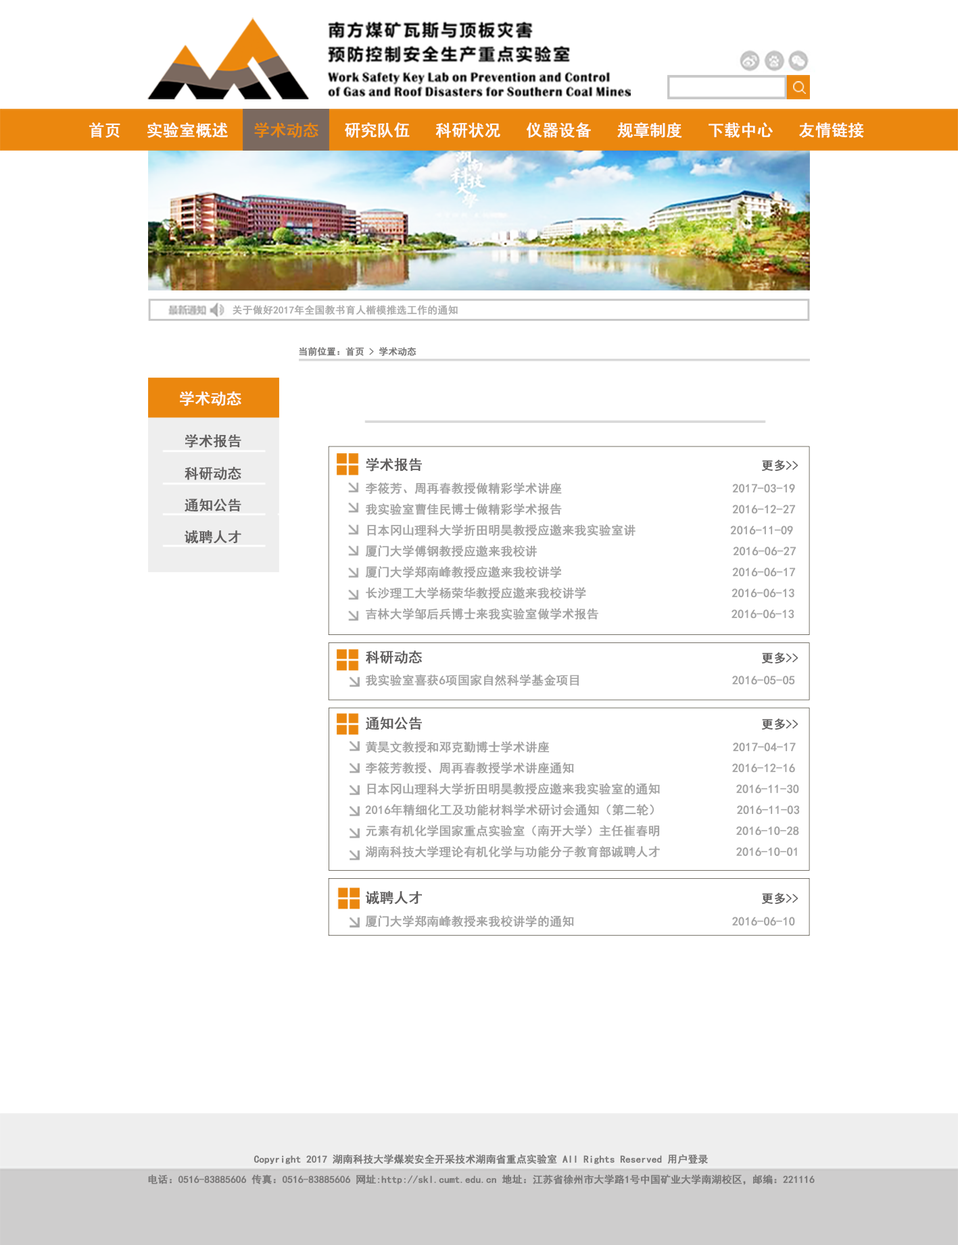
<style>
.page{position:relative;width:958px;height:1245px;background:#ffffff}
.page>*{position:absolute;margin:0}
.t1{font:16px "SimHei";color:#fffcfc;font-weight:bold}
.t2{font:16px "SimHei";color:#eb870e;font-weight:bold}
.t3{font:10px "SimHei";color:#acacac;font-weight:bold}
.t4{font:9.2px "SimHei";color:#787777;font-weight:bold}
.t5{font:15.3px "SimHei";color:#fefbfb;font-weight:bold}
.t6{font:14px/31.9px "SimHei";color:#605e5e;font-weight:bold}
.t7{font:12px "SimHei";color:#a3a3a3;font-weight:bold}
.t8{font:14px "SimHei";color:#605e5e;font-weight:bold}
.t9{font:12px "SimHei";color:#605e5e;font-weight:bold}
.t10{font:9.9px/9.9px "SimHei";color:#787777;font-weight:bold}
</style>
<div class="page">
<p class="t1" style="left:89px;top:122px;width:775px;height:16px">首页   实验室概述 <span class="t2">  学术动态 </span>  研究队伍   科研状况   仪器设备   规章制度   下载中心   友情链接</p>
<p class="t3" style="left:232px;top:305px;width:225px;height:10px">关于做好2017年全国教书育人楷模推选工作的通知</p>
<p class="t4" style="left:299px;top:347px;width:117px;height:9px">当前位置：首页 &gt; 学术动态</p>
<p class="t5" style="left:180px;top:391px;width:61px;height:15px">学术动态</p>
<p class="t6" style="left:184px;top:434px;width:57px;height:110px">学术报告 <br>科研动态 <br>通知公告 <br>诚聘人才</p>
<p class="t7" style="left:365px;top:457px;width:434px;height:471px"><span class="t8">学术报告                                              </span><span class="t9">更多&gt;&gt; <br></span>李筱芳、周再春教授做精彩学术讲座                           2017-03-19<br>我实验室曹佳民博士做精彩学术报告                           2016-12-27 <br>日本冈山理科大学折田明昊教授应邀来我实验室讲               2016-11-09 <br>厦门大学傅钢教授应邀来我校讲                               2016-06-27 <br>厦门大学郑南峰教授应邀来我校讲学                           2016-06-17 <br>长沙理工大学杨荣华教授应邀来我校讲学                       2016-06-13 <br>吉林大学邹后兵博士来我实验室做学术报告                     2016-06-13 <br><br><span class="t8">科研动态                                              </span><span class="t9">更多&gt;&gt; <br></span>我实验室喜获6项国家自然科学基金项目                        2016-05-05 <br><br><span class="t8">通知公告                                              </span><span class="t9">更多&gt;&gt; <br></span>黄昊文教授和邓克勤博士学术讲座                             2017-04-17 <br>李筱芳教授、周再春教授学术讲座通知                         2016-12-16 <br>日本冈山理科大学折田明昊教授应邀来我实验室的通知            2016-11-30<br>2016年精细化工及功能材料学术研讨会通知（第二轮）            2016-11-03<br>元素有机化学国家重点实验室（南开大学）主任崔春明            2016-10-28 <br>湖南科技大学理论有机化学与功能分子教育部诚聘人才            2016-10-01<br><span class="t8"><br>诚聘人才                                              </span><span class="t9">更多&gt;&gt; <br></span>厦门大学郑南峰教授来我校讲学的通知                         2016-06-10</p>
<p class="t10" style="left:148px;top:1154px;width:666px;height:31px;text-align:center">Copyright 2017 湖南科技大学煤炭安全开采技术湖南省重点实验室 All Rights Reserved 用户登录 <br><br>电话：0516-83885606 传真：0516-83885606 网址:http://skl.cumt.edu.cn 地址：江苏省徐州市大学路1号中国矿业大学南湖校区，邮编：221116</p>
</div>
